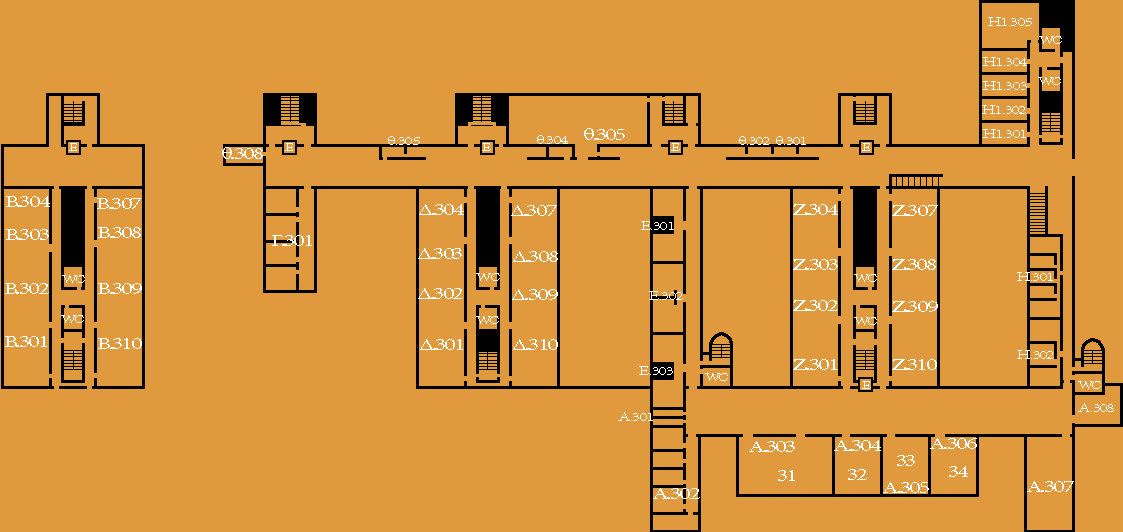
<style>
.page{position:relative;width:1123px;height:532px;background:#e0993d}
.page>*{position:absolute;margin:0}
.t1{font:12.9px "MinionPro-Regular";letter-spacing:-0.08em;color:#ffffff;scale:1.45 1}
.t2{font:11px "MinionPro-Regular";letter-spacing:-0.08em;color:#ffffff;scale:1.45 1}
.t3{font:16.6px "MinionPro-Regular";letter-spacing:-0.08em;color:#ffffff;scale:1.45 1}
</style>
<div class="page">
<p class="t1" style="left:988px;top:17px;width:44px;height:9px">Η1.305</p>
<p class="t2" style="left:1039px;top:36px;width:23px;height:8px">WC</p>
<p class="t1" style="left:983px;top:57px;width:44px;height:9px">Η1.304</p>
<p class="t2" style="left:1038px;top:77px;width:23px;height:8px">WC</p>
<p class="t1" style="left:983px;top:81px;width:44px;height:9px">Η1.303</p>
<p class="t1" style="left:982px;top:105px;width:44px;height:9px">Η1.302</p>
<p class="t1" style="left:388px;top:136px;width:32px;height:9px">θ.305</p>
<p class="t1" style="left:537px;top:135px;width:31px;height:9px">θ.304</p>
<p class="t3" style="left:584px;top:128px;width:41px;height:12px">θ.305</p>
<p class="t1" style="left:739px;top:136px;width:31px;height:9px">θ.302</p>
<p class="t1" style="left:776px;top:136px;width:30px;height:9px">θ.301</p>
<p class="t1" style="left:983px;top:129px;width:43px;height:9px">Η1.301</p>
<p class="t2" style="left:69px;top:143px;width:9px;height:8px">Ε</p>
<p class="t3" style="left:222px;top:147px;width:41px;height:12px">θ.308</p>
<p class="t2" style="left:285px;top:143px;width:9px;height:8px">Ε</p>
<p class="t2" style="left:482px;top:143px;width:9px;height:8px">Ε</p>
<p class="t2" style="left:671px;top:143px;width:9px;height:8px">Ε</p>
<p class="t2" style="left:862px;top:143px;width:9px;height:8px">Ε</p>
<p class="t3" style="left:6px;top:196px;width:44px;height:11px">Β.304</p>
<p class="t3" style="left:97px;top:198px;width:44px;height:11px">Β.307</p>
<p class="t3" style="left:419px;top:204px;width:45px;height:11px">Δ.304</p>
<p class="t3" style="left:511px;top:205px;width:46px;height:11px">Δ.307</p>
<p class="t3" style="left:793px;top:204px;width:45px;height:11px">Ζ.304</p>
<p class="t3" style="left:892px;top:205px;width:46px;height:11px">Ζ.307</p>
<p class="t1" style="left:641px;top:221px;width:33px;height:9px">Ε.301</p>
<p class="t3" style="left:6px;top:229px;width:43px;height:11px">Β.303</p>
<p class="t3" style="left:98px;top:227px;width:43px;height:11px">Β.308</p>
<p class="t3" style="left:272px;top:235px;width:40px;height:11px">Γ.301</p>
<p class="t3" style="left:418px;top:248px;width:44px;height:11px">Δ.303</p>
<p class="t3" style="left:513px;top:251px;width:45px;height:11px">Δ.308</p>
<p class="t3" style="left:793px;top:259px;width:45px;height:11px">Ζ.303</p>
<p class="t3" style="left:892px;top:259px;width:44px;height:11px">Ζ.308</p>
<p class="t2" style="left:62px;top:275px;width:23px;height:8px">WC</p>
<p class="t2" style="left:476px;top:273px;width:24px;height:8px">WC</p>
<p class="t2" style="left:854px;top:274px;width:23px;height:8px">WC</p>
<p class="t1" style="left:1017px;top:272px;width:36px;height:9px">Η.301</p>
<p class="t3" style="left:5px;top:283px;width:44px;height:11px">Β.302</p>
<p class="t3" style="left:98px;top:283px;width:44px;height:11px">Β.309</p>
<p class="t3" style="left:418px;top:288px;width:45px;height:11px">Δ.302</p>
<p class="t3" style="left:512px;top:289px;width:46px;height:11px">Δ.309</p>
<p class="t1" style="left:649px;top:291px;width:34px;height:9px">Ε.302</p>
<p class="t3" style="left:793px;top:300px;width:45px;height:11px">Ζ.302</p>
<p class="t3" style="left:892px;top:301px;width:46px;height:11px">Ζ.309</p>
<p class="t2" style="left:61px;top:315px;width:23px;height:8px">WC</p>
<p class="t2" style="left:476px;top:316px;width:23px;height:8px">WC</p>
<p class="t2" style="left:854px;top:317px;width:23px;height:8px">WC</p>
<p class="t3" style="left:5px;top:336px;width:42px;height:11px">Β.301</p>
<p class="t3" style="left:98px;top:338px;width:44px;height:11px">Β.310</p>
<p class="t3" style="left:420px;top:339px;width:43px;height:11px">Δ.301</p>
<p class="t3" style="left:513px;top:339px;width:45px;height:11px">Δ.310</p>
<p class="t1" style="left:1017px;top:350px;width:37px;height:9px">Η.302</p>
<p class="t1" style="left:639px;top:366px;width:34px;height:9px">Ε.303</p>
<p class="t3" style="left:793px;top:359px;width:44px;height:11px">Ζ.301</p>
<p class="t3" style="left:892px;top:359px;width:45px;height:11px">Ζ.310</p>
<p class="t2" style="left:705px;top:373px;width:23px;height:8px">WC</p>
<p class="t2" style="left:862px;top:381px;width:9px;height:8px">Ε</p>
<p class="t2" style="left:1078px;top:381px;width:23px;height:8px">WC</p>
<p class="t1" style="left:618px;top:412px;width:35px;height:9px">Α.301</p>
<p class="t1" style="left:1078px;top:403px;width:36px;height:9px">Α.308</p>
<p class="t3" style="left:930px;top:438px;width:47px;height:11px">Α.306</p>
<p class="t3" style="left:749px;top:441px;width:46px;height:11px">Α.303</p>
<p class="t3" style="left:834px;top:440px;width:47px;height:11px">Α.304</p>
<p class="t3" style="left:897px;top:455px;width:18px;height:11px">33</p>
<p class="t3" style="left:778px;top:470px;width:17px;height:11px">31</p>
<p class="t3" style="left:848px;top:469px;width:19px;height:11px">32</p>
<p class="t3" style="left:949px;top:466px;width:19px;height:11px">34</p>
<p class="t3" style="left:883px;top:482px;width:46px;height:11px">Α.305</p>
<p class="t3" style="left:1027px;top:481px;width:47px;height:11px">Α.307</p>
<p class="t3" style="left:653px;top:488px;width:47px;height:11px">Α.302</p>
</div>
